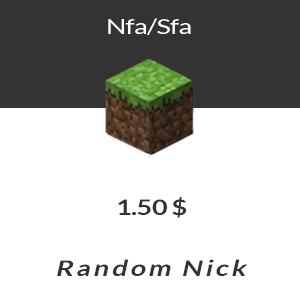
<style>
.page{position:relative;width:300px;height:304px;background:#ffffff}
.page>*{position:absolute;margin:0}
.t1{font:21.3px "Lato-Regular";letter-spacing:-0.025em;color:#ffffff;scale:1.26 1}
.t2{font:21.6px "Lato-Bold";letter-spacing:-0.025em;color:#333333;scale:1.26 1}
.t3{font:21.6px "Lato-Bold";letter-spacing:0.1em;color:#333333;font-style:italic;scale:1.26 1}
</style>
<div class="page">
<p class="t1" style="left:108px;top:18px;width:83px;height:17px">Nfa/Sfa</p>
<p class="t2" style="left:118px;top:197px;width:69px;height:21px">1.50 $</p>
<p class="t3" style="left:57px;top:259px;width:191px;height:17px">Random Nick</p>
</div>
